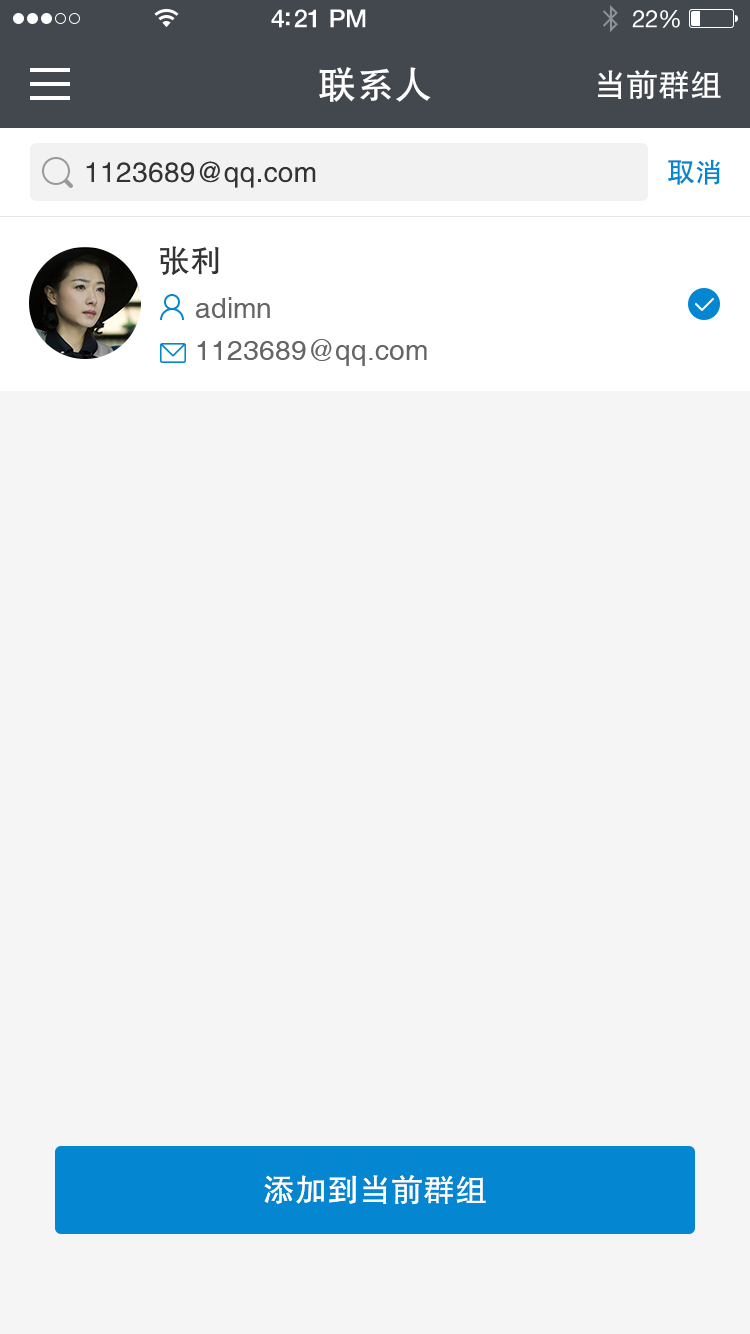
<style>
.page{position:relative;width:750px;height:1334px;background:#f5f5f5}
.page>*{position:absolute;margin:0}
.t1{font:38px "FZHTJW--GB1-0";color:#ffffff}
.t2{font:32px "FZHTJW--GB1-0";color:#ffffff}
.t3{font:28px "FZHTJW--GB1-0";color:#333333}
.t4{font:28px "FZHTJW--GB1-0";color:#0487d0}
.t5{font:32px "FZHTJW--GB1-0";color:#333333}
.t6{font:28px "Helvetica";color:#666666}
.t7{font:32px "FZHTJW--GB1-0";color:#fffefe}
</style>
<div class="page">
<p class="t1" style="left:319px;top:67px;width:112px;height:35px">联系人</p>
<p class="t2" style="left:598px;top:70px;width:123px;height:29px">当前群组</p>
<p class="t3" style="left:86px;top:161px;width:230px;height:27px">1123689@qq.com</p>
<p class="t4" style="left:668px;top:159px;width:52px;height:26px">取消</p>
<p class="t5" style="left:160px;top:246px;width:59px;height:29px">张利</p>
<p class="t6" style="left:196px;top:297px;width:74px;height:21px">adimn</p>
<p class="t6" style="left:197px;top:339px;width:230px;height:27px">1123689@qq.com</p>
<p class="t7" style="left:264px;top:1175px;width:222px;height:30px">添加到当前群组</p>
</div>
